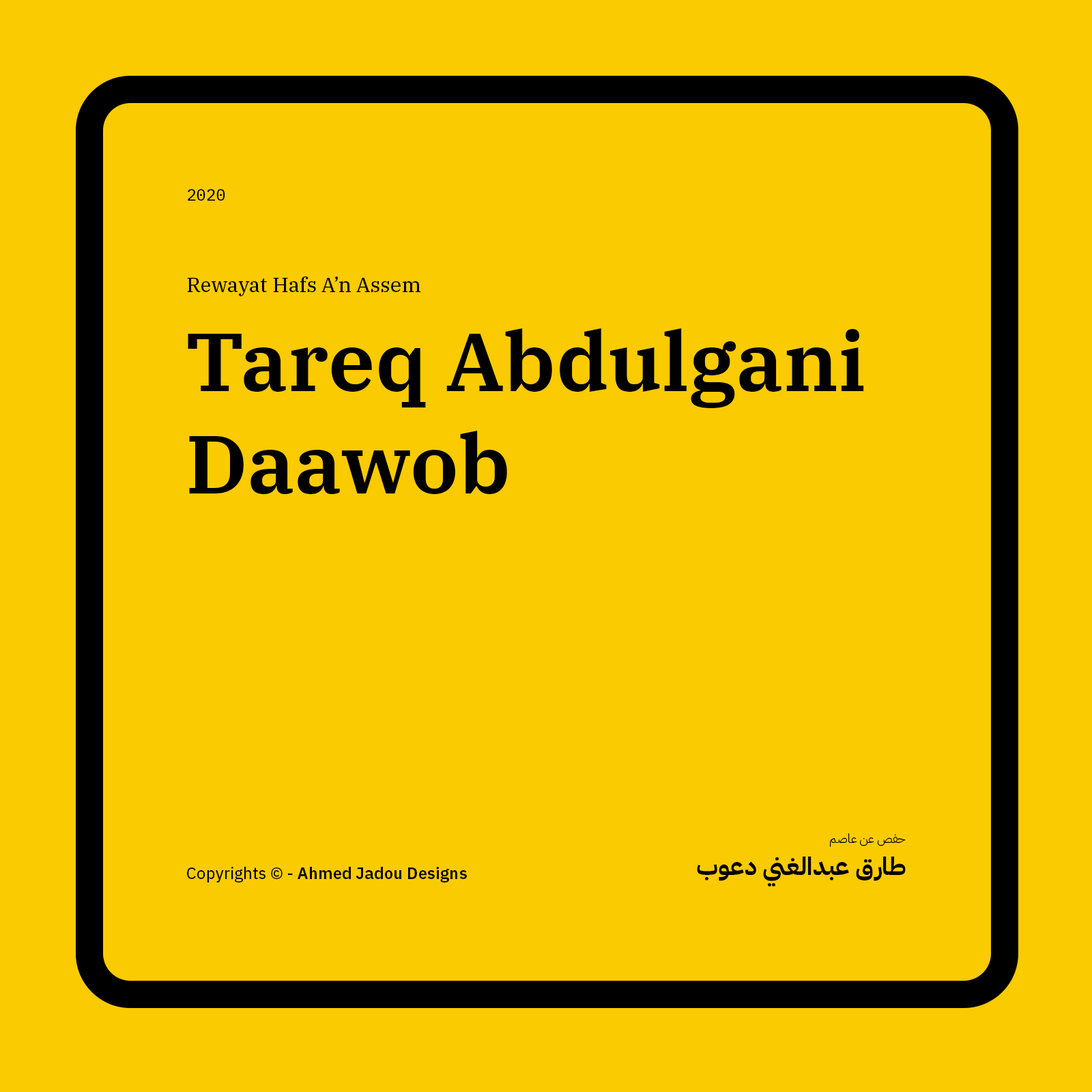
<style>
.page{position:relative;width:1092px;height:1092px;background:#facb00}
.page>*{position:absolute;margin:0}
.t1{font:16.4px "IBMPlexMono-Text";color:#000000}
.t2{font:20.5px "IBMPlexSerif-Text";color:#000000}
.t3{font:81.9px/102.7px "IBMPlexSerif-SemiBold";color:#000000}
.t4{font:12.3px "IBMPlexArabic-Light";color:#000000}
.t5{font:24.6px "IBMPlexArabic-Bold";color:#000000}
.t6{font:16.4px "IBMPlexSans-SemiBold";color:#000000}
.t7{font:16.4px "IBMPlexSans-Text";color:#000000}
</style>
<div class="page">
<p class="t1" style="left:188px;top:189px;width:37px;height:12px">2020</p>
<p class="t2" style="left:187px;top:276px;width:233px;height:20px">Rewayat Hafs A’n Assem</p>
<p class="t3" style="left:188px;top:328px;width:676px;height:166px">Tareq Abdulgani Daawob</p>
<p class="t4" style="left:830px;top:833px;width:76px;height:14px">حفص عن عاصم</p>
<p class="t5" style="left:697px;top:857px;width:209px;height:30px">طارق عبدالغني دعوب</p>
<p class="t6" style="left:187px;top:867px;width:280px;height:15px"><span class="t7">Copyrights © - </span>Ahmed Jadou Designs</p>
</div>
